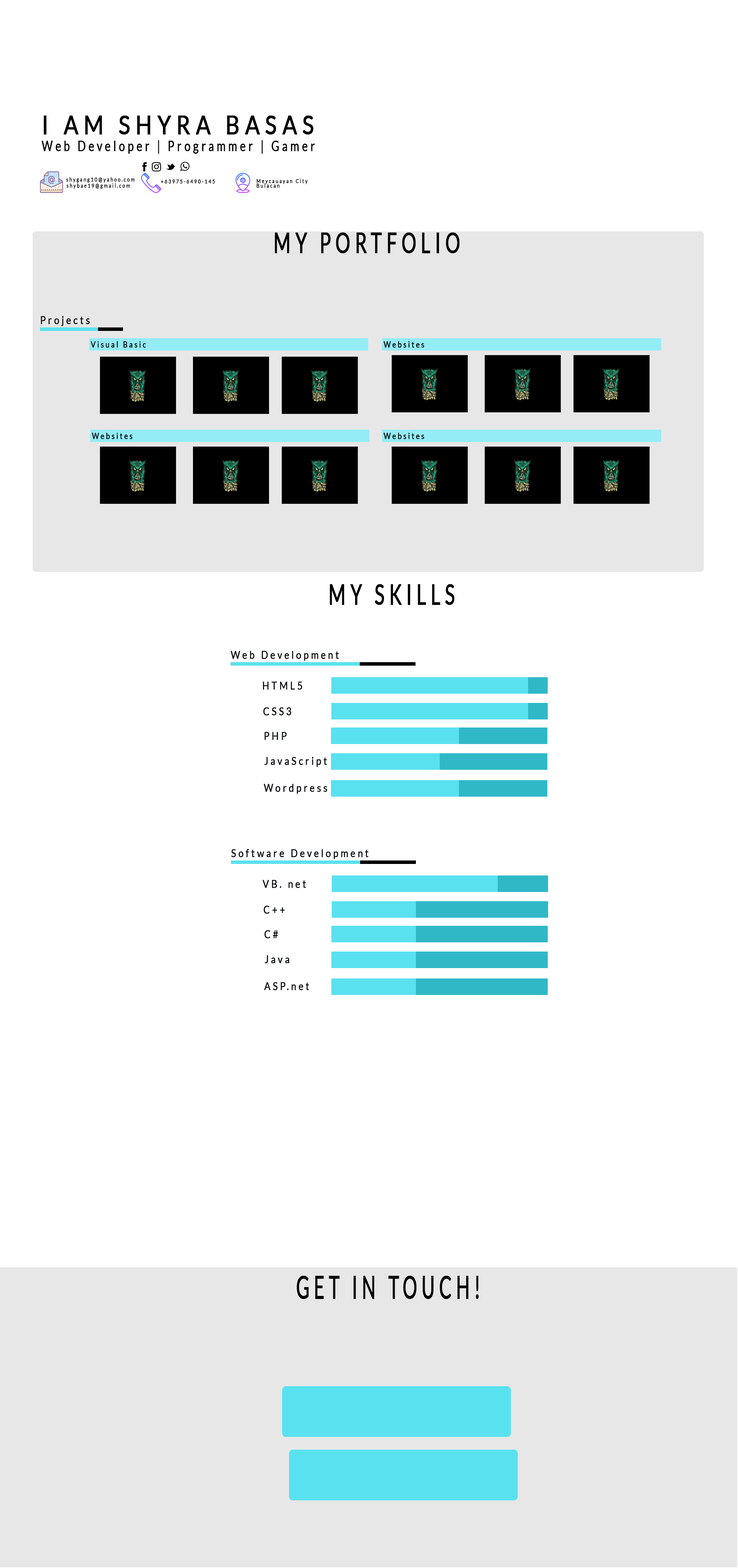
<style>
.page{position:relative;width:738px;height:1568px;background:#ffffff}
.page>*{position:absolute;margin:0}
.t1{font:26.2px "Lato-Regular";letter-spacing:0.225em;color:#000000;font-weight:bold;scale:0.83 1}
.t2{font:13.8px "Lato-Regular";letter-spacing:0.225em;color:#000000;font-weight:bold;scale:0.79 1}
.t3{font:5.6px "Lato-Regular";letter-spacing:0.225em;color:#000000;font-weight:bold;scale:0.83 1}
.t4{font:5.6px/4.6px "Lato-Regular";letter-spacing:0.225em;color:#000000;font-weight:bold;scale:0.83 1}
.t5{font:28.1px "Lato-Regular";letter-spacing:0.225em;color:#000000;font-weight:bold;scale:0.66 1}
.t6{font:11.2px "Lato-Regular";letter-spacing:0.225em;color:#010708;font-weight:bold;scale:0.83 1}
.t7{font:8.4px "Lato-Regular";letter-spacing:0.225em;color:#000000;font-weight:bold;scale:0.83 1}
.t8{font:32.5px "Lato-Regular";letter-spacing:0.225em;color:#000000;font-weight:bold;scale:0.55 1}
</style>
<div class="page">
<p class="t1" style="left:43px;top:115px;width:271px;height:20px">I AM SHYRA BASAS</p>
<p class="t2" style="left:42px;top:140px;width:273px;height:14px">Web Developer | Programmer | Gamer</p>
<p class="t3" style="left:66px;top:177px;width:69px;height:6px">shygang10@yahoo.com</p>
<p class="t3" style="left:66px;top:183px;width:64px;height:6px">shybae19@gmail.com</p>
<p class="t3" style="left:161px;top:179px;width:54px;height:5px">+63975-6490-145</p>
<p class="t4" style="left:256px;top:179px;width:52px;height:9px;text-align:justify">Meycauayan City<br>Bulacan</p>
<p class="t5" style="left:275px;top:233px;width:185px;height:20px">MY PORTFOLIO</p>
<p class="t6" style="left:41px;top:316px;width:49px;height:10px">Projects</p>
<p class="t7" style="left:91px;top:341px;width:55px;height:7px">Visual Basic</p>
<p class="t7" style="left:384px;top:341px;width:40px;height:7px">Websites</p>
<p class="t7" style="left:92px;top:433px;width:41px;height:6px">Websites</p>
<p class="t7" style="left:384px;top:433px;width:40px;height:6px">Websites</p>
<p class="t5" style="left:330px;top:584px;width:124px;height:21px">MY SKILLS</p>
<p class="t6" style="left:231px;top:651px;width:108px;height:10px">Web Development</p>
<p class="t6" style="left:263px;top:681px;width:39px;height:9px">HTML5</p>
<p class="t6" style="left:263px;top:707px;width:28px;height:9px">CSS3</p>
<p class="t6" style="left:264px;top:732px;width:23px;height:8px">PHP</p>
<p class="t6" style="left:264px;top:757px;width:63px;height:10px">JavaScript</p>
<p class="t6" style="left:264px;top:784px;width:63px;height:10px">Wordpress</p>
<p class="t6" style="left:231px;top:849px;width:138px;height:10px">Software Development</p>
<p class="t6" style="left:262px;top:880px;width:44px;height:8px">VB. net</p>
<p class="t6" style="left:264px;top:905px;width:21px;height:9px">C++</p>
<p class="t6" style="left:264px;top:930px;width:14px;height:8px">C#</p>
<p class="t6" style="left:264px;top:955px;width:25px;height:8px">Java</p>
<p class="t6" style="left:264px;top:982px;width:45px;height:8px">ASP.net</p>
<p class="t8" style="left:297px;top:1276px;width:182px;height:23px">GET IN TOUCH!</p>
</div>
